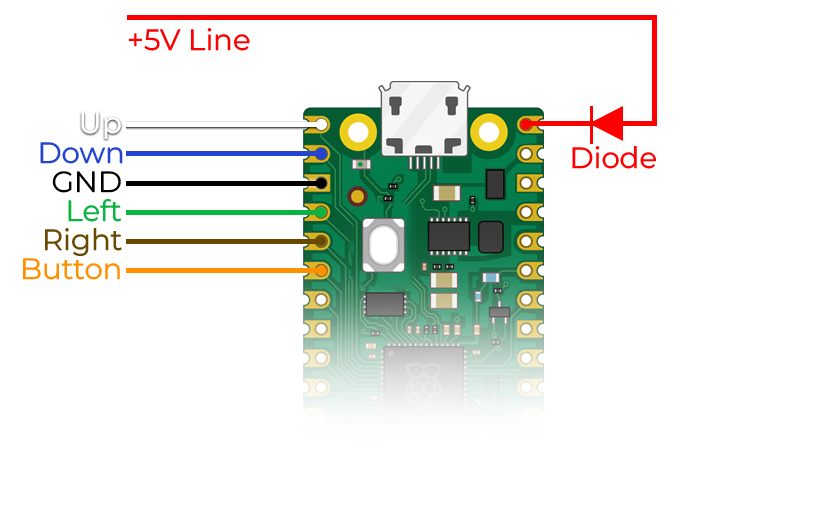
<style>
.page{position:relative;width:822px;height:505px;background:#ffffff}
.page>*{position:absolute;margin:0}
.t1{font:29.2px "MontserratRoman-Regular";color:#ff0000}
.t2{font:29.2px "MontserratRoman-Regular";color:#2344d0}
.t3{font:29.2px "MontserratRoman-Regular";color:#000000}
.t4{font:29.2px "MontserratRoman-Regular";color:#09b441}
.t5{font:29.2px "MontserratRoman-Regular";color:#694800}
.t6{font:29.2px "MontserratRoman-Regular";color:#ff9000}
</style>
<div class="page">
<p class="t1" style="left:128px;top:28px;width:122px;height:23px">+5V Line</p>
<p class="t2" style="left:40px;top:142px;width:83px;height:22px">Down</p>
<p class="t1" style="left:572px;top:146px;width:84px;height:23px">Diode</p>
<p class="t3" style="left:52px;top:171px;width:69px;height:22px">GND</p>
<p class="t4" style="left:68px;top:199px;width:54px;height:23px">Left</p>
<p class="t5" style="left:45px;top:228px;width:77px;height:28px">Right</p>
<p class="t6" style="left:23px;top:258px;width:97px;height:22px">Button</p>
</div>
